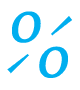
<style>
.page{position:relative;width:80px;height:90px;background:#ffffff}
.page>*{position:absolute;margin:0}
.t1{font:110px "SourceCodePro-Black";letter-spacing:0.2em}
</style>
<div class="page">
<p class="t1" style="left:3px;top:8px;width:74px;height:73px">%</p>
</div>
